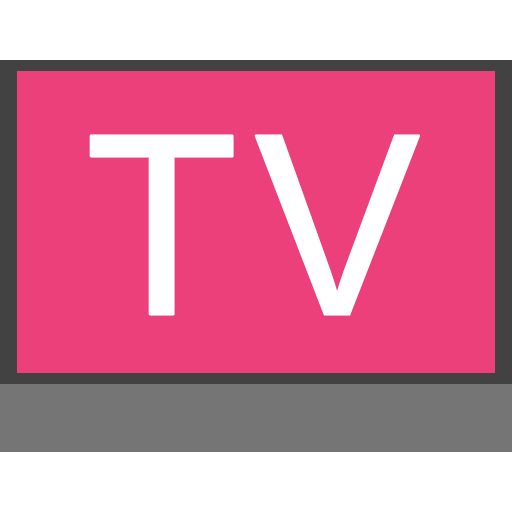
<style>
.page{position:relative;width:512px;height:512px;background:#ec407a}
.page>*{position:absolute;margin:0}
.t1{font:250px "ArialMT";letter-spacing:0.04em;color:#ffffff;font-weight:bold}
</style>
<div class="page">
<p class="t1" style="left:89px;top:134px;width:331px;height:182px">TV</p>
</div>
